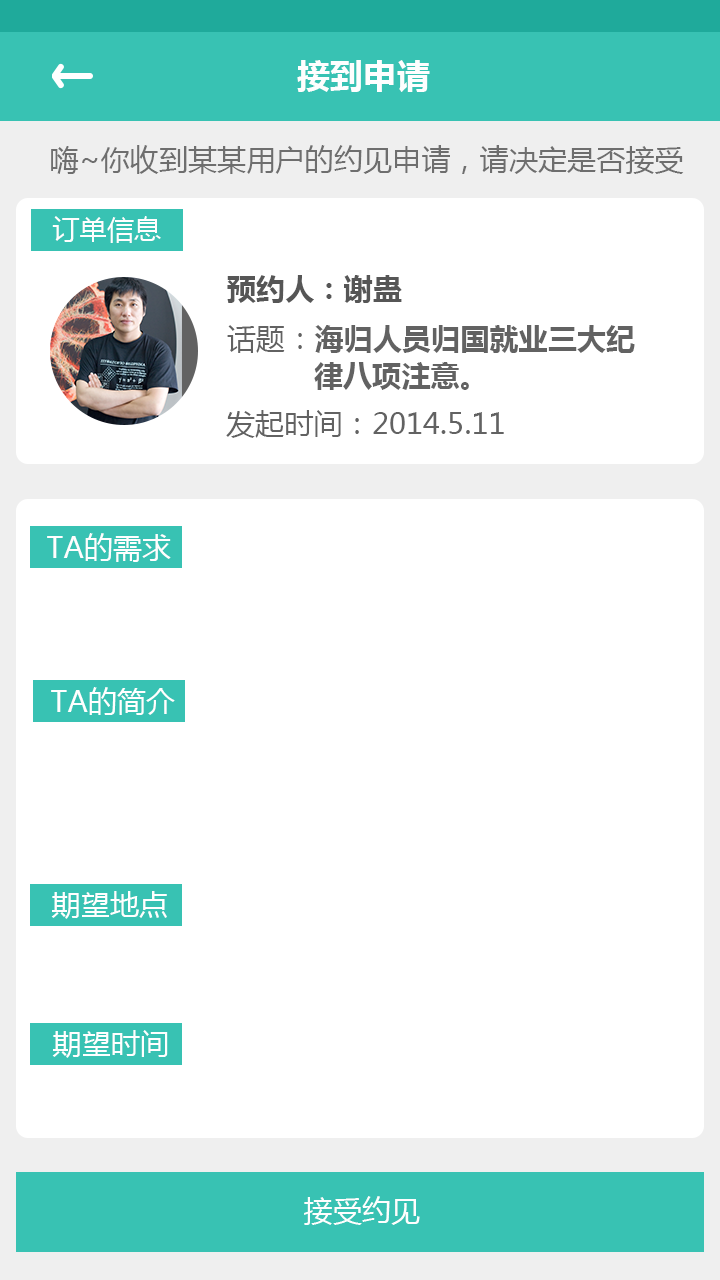
<style>
.page{position:relative;width:720px;height:1280px;background:#ffffff}
.page>*{position:absolute;margin:0}
.t1{font:33.3px "MicrosoftYaHei-Bold";color:#fefefe}
.t2{font:29.2px "MicrosoftYaHei";color:#6e6e6e}
.t3{font:27.1px "MicrosoftYaHei";color:#fefefe}
.t4{font:29.2px "MicrosoftYaHei-Bold";color:#565656}
.t5{font:29.2px/37.5px "MicrosoftYaHei-Bold";color:#626262}
.t6{font:29.2px/37.5px "MicrosoftYaHei";color:#626262}
.t7{font:29.2px "MicrosoftYaHei";color:#626262}
.t8{font:29.2px "MicrosoftYaHei";color:#fefefe}
.t9{font:29.2px "MicrosoftYaHei";color:#ffffff}
</style>
<div class="page">
<p class="t1" style="left:297px;top:60px;width:133px;height:32px">接到申请</p>
<p class="t2" style="left:51px;top:145px;width:633px;height:29px">嗨~你收到某某用户的约见申请，请决定是否接受</p>
<p class="t3" style="left:52px;top:216px;width:109px;height:27px">订单信息</p>
<p class="t4" style="left:227px;top:275px;width:175px;height:28px">预约人：谢蛊</p>
<p class="t5" style="left:227px;top:325px;width:408px;height:65px"><span class="t6">话题：</span>海归人员归国就业三大纪<br>          律八项注意。</p>
<p class="t7" style="left:226px;top:410px;width:278px;height:28px">发起时间：2014.5.11</p>
<p class="t8" style="left:47px;top:533px;width:124px;height:29px">TA的需求</p>
<p class="t9" style="left:51px;top:687px;width:124px;height:28px">TA的简介</p>
<p class="t9" style="left:51px;top:891px;width:116px;height:28px">期望地点</p>
<p class="t9" style="left:52px;top:1030px;width:116px;height:28px">期望时间</p>
<p class="t8" style="left:304px;top:1196px;width:116px;height:29px">接受约见</p>
</div>
